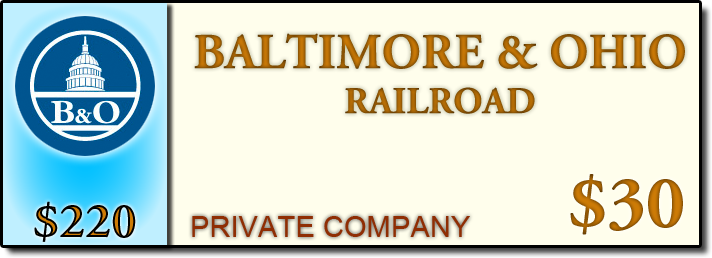
<style>
.page{position:relative;width:712px;height:258px;background:#fffeec}
.page>*{position:absolute;margin:0}
.t1{font:50px "AGaramondPro-Bold"}
.t2{font:37.5px "AGaramondPro-Bold"}
.t3{font:75px "AGaramondPro-Bold"}
.t4{font:50px "AGaramondPro-Bold";color:#000000}
.t5{font:29.2px "ArialMT";color:#8f2e04}
</style>
<div class="page">
<p class="t1" style="left:194px;top:33px;width:491px;height:81px;text-align:center">BALTIMORE &amp; OHIO<br><span class="t2">RAILROAD</span></p>
<p class="t3" style="left:570px;top:174px;width:113px;height:61px">$30</p>
<p class="t4" style="left:34px;top:201px;width:102px;height:41px">$220</p>
<p class="t5" style="left:192px;top:216px;width:278px;height:21px">PRIVATE COMPANY</p>
</div>
